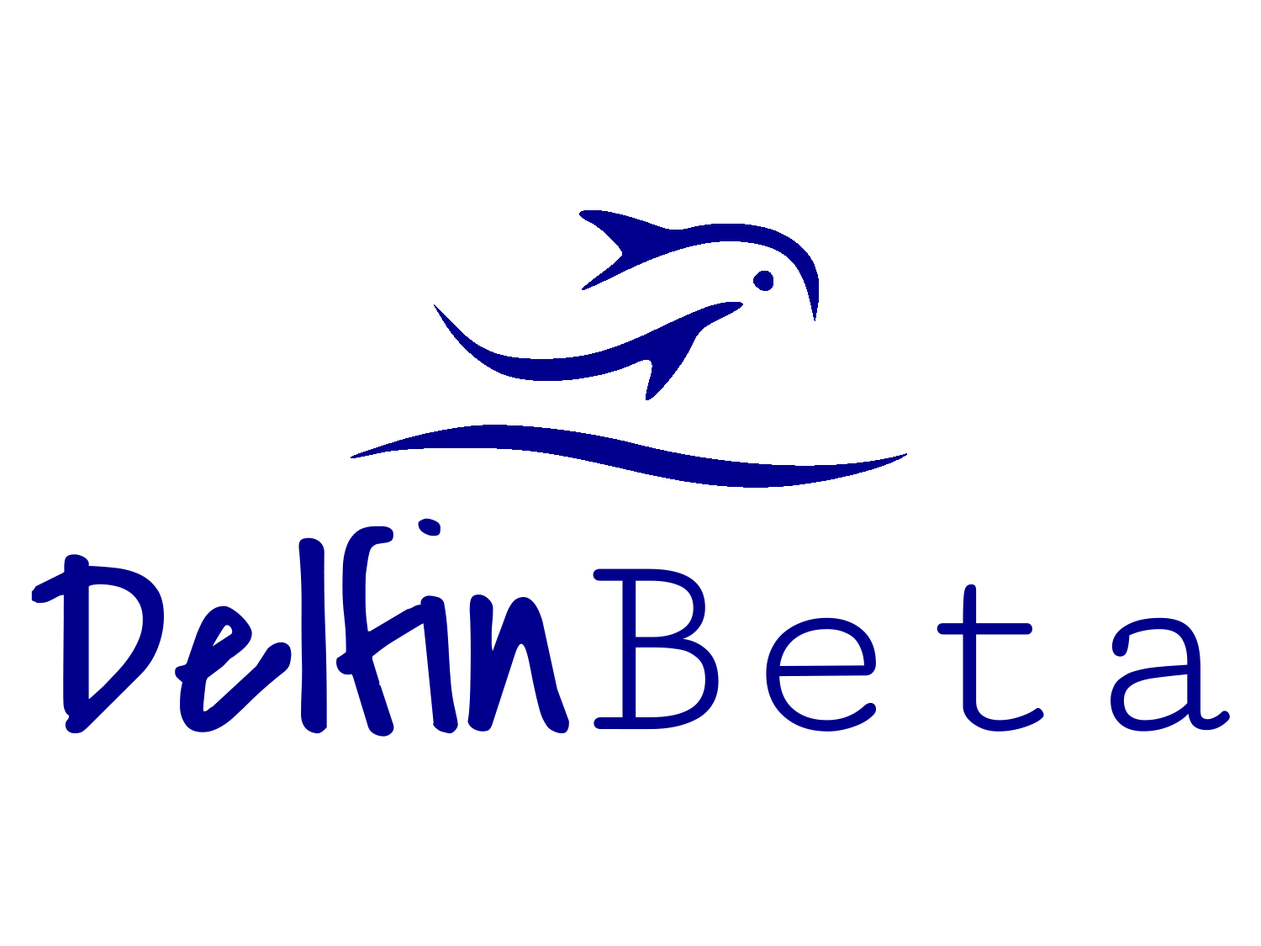
<style>
.page{position:relative;width:1261px;height:946px;background:#ffffff}
.page>*{position:absolute;margin:0}
.t1{font:280.2px "CoveredByYourGrace";color:#00008c}
.t2{font:280.2px "CutiveMono-Regular";color:#00008c}
</style>
<div class="page">
<p class="t1" style="left:31px;top:518px;width:538px;height:218px">Delfin</p>
<p class="t2" style="left:593px;top:568px;width:637px;height:163px">Beta</p>
</div>
